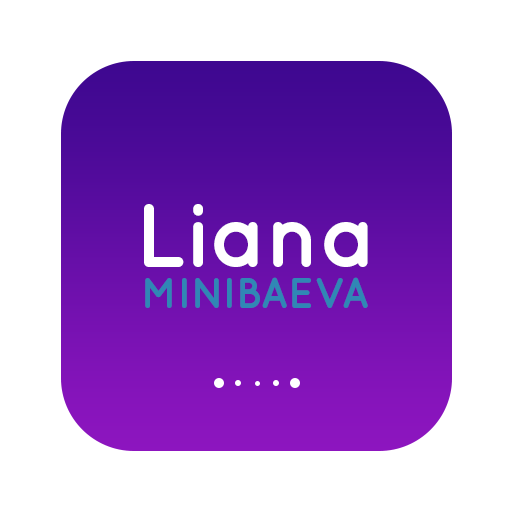
<style>
.page{position:relative;width:512px;height:512px;background:#ffffff}
.page>*{position:absolute;margin:0}
.t1{font:90px "Quicksand-Bold";color:#ffffff}
.t2{font:43.3px "Quicksand-Bold";color:#3087b5}
</style>
<div class="page">
<p class="t1" style="left:144px;top:204px;width:224px;height:63px">Liana</p>
<p class="t2" style="left:145px;top:277px;width:223px;height:31px">MINIBAEVA</p>
</div>
